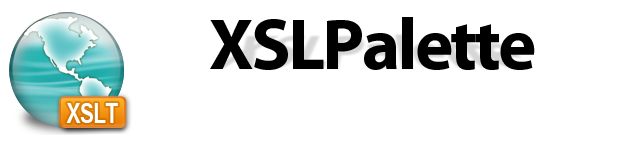
<style>
.page{position:relative;width:622px;height:148px;background:#ffffff}
.page>*{position:absolute;margin:0}
.t1{font:73.1px "Myriad-Bold";letter-spacing:-0.04em;color:#000000}
</style>
<div class="page">
<p class="t1" style="left:210px;top:17px;width:325px;height:53px">XSLPalette</p>
</div>
